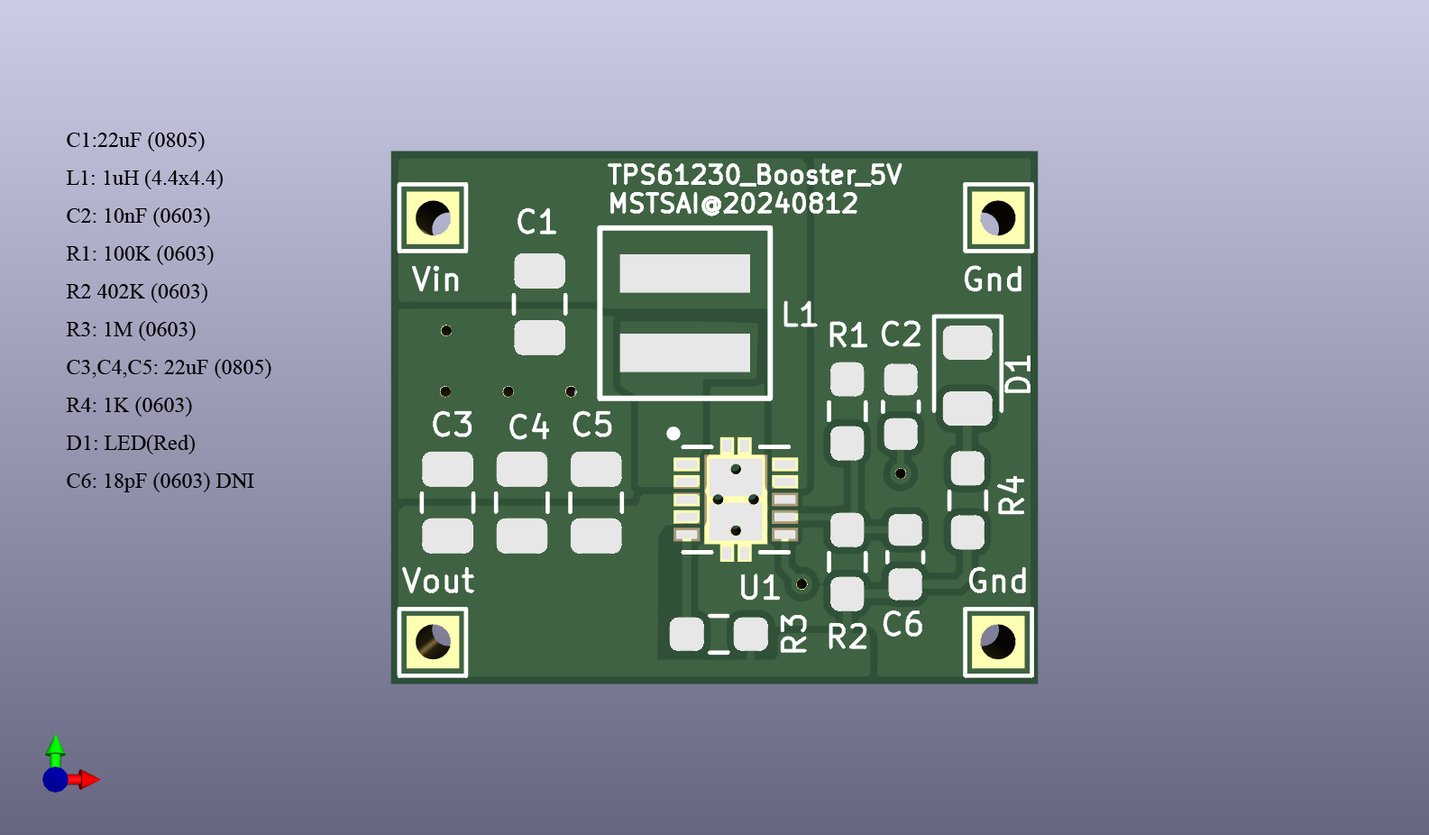
<style>
.page{position:relative;width:1429px;height:835px}
.page>*{position:absolute;margin:0}
.t1{font:21.6px "TimesNewRomanPSMT";color:#010101}
</style>
<div class="page">
<p class="t1" style="left:66px;top:132px;width:205px;height:360px">C1:22uF (0805)<br>L1: 1uH (4.4x4.4)<br>C2: 10nF (0603)<br>R1: 100K (0603)<br>R2 402K (0603)<br>R3: 1M (0603)<br>C3,C4,C5: 22uF (0805)<br>R4: 1K (0603)<br>D1: LED(Red)<br>C6: 18pF (0603) DNI</p>
</div>
